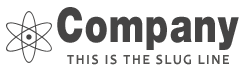
<style>
.page{position:relative;width:250px;height:72px;background:#ffffff}
.page>*{position:absolute;margin:0}
.t1{font:48px "HelveticaNeueLT-Black";letter-spacing:0.01em;color:#454444;scale:0.78 1}
.t2{font:14px "Candara-Bold";letter-spacing:0.1em;color:#535251}
</style>
<div class="page">
<p class="t1" style="left:57px;top:7px;width:182px;height:43px">Company</p>
<p class="t2" style="left:67px;top:54px;width:162px;height:11px">THIS IS THE SLUG LINE</p>
</div>
